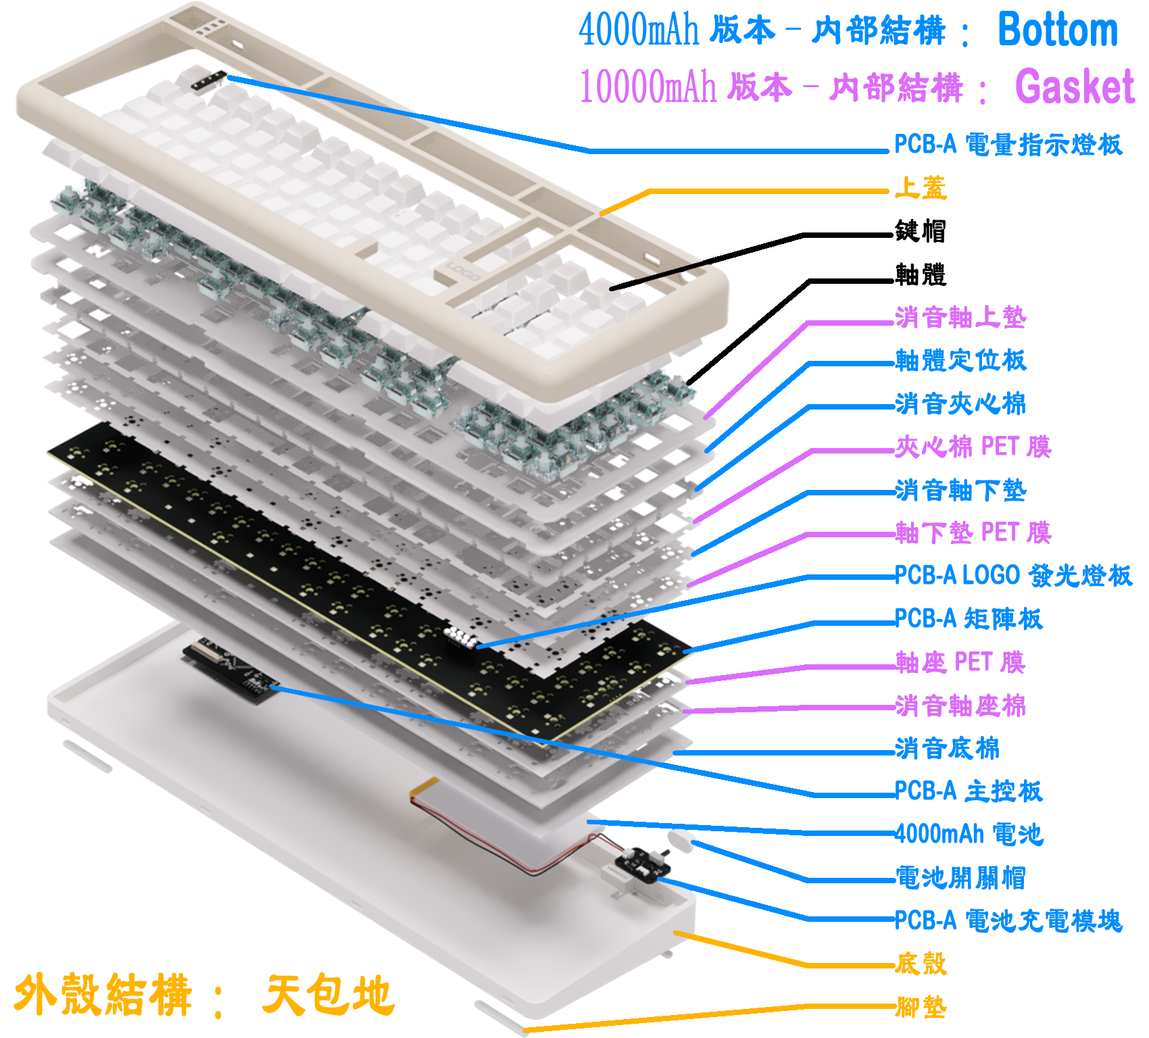
<style>
.page{position:relative;width:1149px;height:1038px;background:#ffffff}
.page>*{position:absolute;margin:0}
.t1{font:47.3px/57.4px "LiSu";color:#dc6cfb;font-weight:bold;scale:0.7 1}
.t2{font:47.3px/57.4px "LiSu";color:#008cff;font-weight:bold;scale:0.7 1}
.t3{font:47.3px/57.4px "ArialRoundedMTBold";color:#008cff;font-weight:bold;scale:0.7 1}
.t4{font:47.3px/57.4px "ArialRoundedMTBold";color:#dc6cfb;font-weight:bold;scale:0.7 1}
.t5{font:37.2px/43.1px "LiSu";color:#008cff;font-weight:bold;scale:0.7 1}
.t6{font:27px/43.1px "ArialRoundedMTBold";color:#008cff;font-weight:bold;scale:0.7 1}
.t7{font:37.2px/43.1px "LiSu";color:#ffb300;font-weight:bold;scale:0.7 1}
.t8{font:37.2px/43.1px "LiSu";color:#000000;font-weight:bold;scale:0.7 1}
.t9{font:37.2px/43.1px "LiSu";color:#dc6cfb;font-weight:bold;scale:0.7 1}
.t10{font:27px/43.1px "ArialRoundedMTBold";color:#dc6cfb;font-weight:bold;scale:0.7 1}
.t11{font:67.6px "LiSu";color:#ffb300;font-weight:bold;scale:0.65 1}
</style>
<div class="page">
<p class="t1" style="left:578px;top:11px;width:557px;height:94px"><span class="t2">4000mAh版本-内部結構：</span><span class="t3">Bottom<br></span>10000mAh版本-内部結構：<span class="t4">Gasket</span></p>
<p class="t5" style="left:894px;top:132px;width:239px;height:887px"><span class="t6">PCB-A</span>電量指示燈板<br><span class="t7">上蓋<br></span><span class="t8">鍵帽<br>軸體<br></span><span class="t9">消音軸上墊<br></span>軸體定位板<br>消音夾心棉<br><span class="t9">夾心棉</span><span class="t10">PET</span><span class="t9">膜<br></span>消音軸下墊<br><span class="t9">軸下墊</span><span class="t10">PET</span><span class="t9">膜<br></span><span class="t6">PCB-A LOGO</span>發光燈板<br><span class="t6">PCB-A</span>矩陣板<br><span class="t9">軸座</span><span class="t10">PET</span><span class="t9">膜<br>消音軸座棉<br></span>消音底棉<br><span class="t6">PCB-A</span>主控板<br><span class="t6">4000mAh</span>電池<br>電池開關帽<br><span class="t6">PCB-A</span>電池充電模塊<br><span class="t7">底殼<br>腳墊</span></p>
<p class="t11" style="left:14px;top:972px;width:381px;height:48px">外殼結構：天包地</p>
</div>
